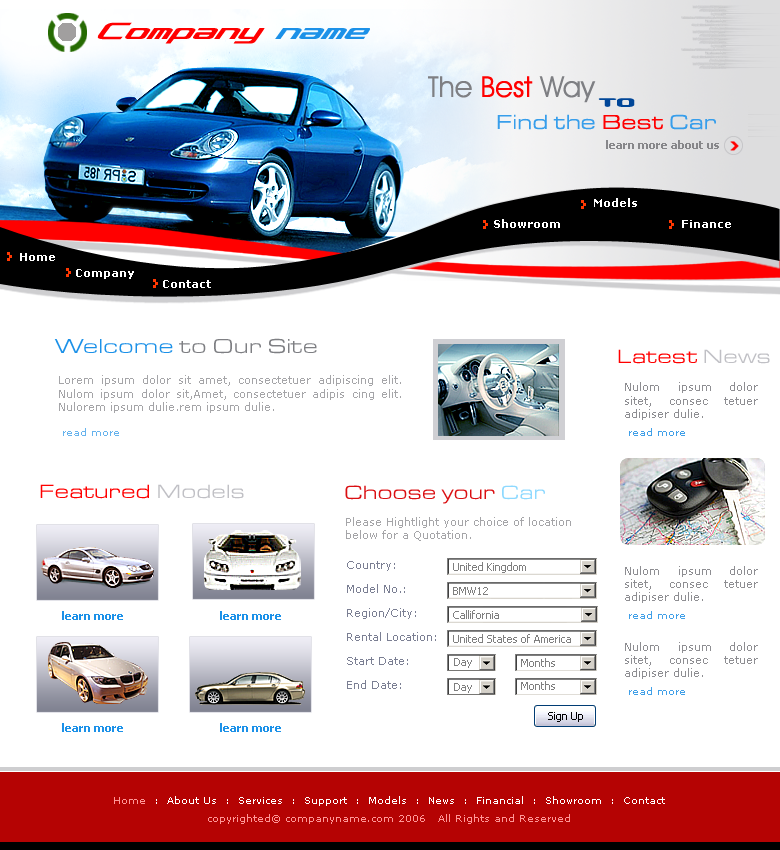
<style>
.page{position:relative;width:780px;height:850px;background:#ffffff}
.page>*{position:absolute;margin:0}
.t1{font:30px "Concielian";color:#ff0000}
.t2{font:30px "Concielian";color:#1c91e8}
.t3{font:29px "AvantGardeITCbyBT-Book";color:#ff0000}
.t4{font:29px "AvantGardeITCbyBT-Book";color:#7e7f83}
.t5{font:22px "Beware";color:#004698}
.t6{font:21px "EurostileExtended-Roman-DTC";color:#379eeb}
.t7{font:21px "EurostileExtended-Roman-DTC";color:#ff0000}
.t8{font:11px "Tahoma-Bold";color:#87878a}
.t9{font:11px "Verdana-Bold";color:#ffffff}
.t10{font:21px "EurostileExtended-Roman-DTC";color:#7e7f83}
.t11{font:21px "EurostileExtended-Roman-DTC";color:#1c91e8}
.t12{font:20px "EurostileExtended-Roman-DTC";color:#ff0000}
.t13{font:20px "EurostileExtended-Roman-DTC";color:#c0c0c5}
.t14{font:11px "Verdana";color:#8e8e92}
.t15{font:10px "Verdana";color:#41a0e8}
.t16{font:20px "EurostileExtended-Roman-DTC";color:#da0f12}
.t17{font:20px "EurostileExtended-Roman-DTC";color:#8ed9ff}
.t18{font:11px "Verdana";color:#a5a5a8}
.t19{font:11px/24px "Verdana";color:#7b7f93}
.t20{font:11px "Tahoma";color:#7f7f7f}
.t21{font:11px "Tahoma-Bold";color:#1c91e8}
.t22{font:10px/18px "Verdana";color:#ffffff}
.t23{font:10px/18px "Verdana";color:#ff9797}
</style>
<div class="page">
<p class="t1" style="left:97px;top:22px;width:273px;height:22px">Company <span class="t2">name</span></p>
<p class="t3" style="left:428px;top:76px;width:168px;height:27px"><span class="t4">The </span>Best<span class="t4"> Way</span></p>
<p class="t5" style="left:598px;top:98px;width:37px;height:9px">to</p>
<p class="t6" style="left:497px;top:114px;width:219px;height:16px">Find the <span class="t7">Best </span>Car</p>
<p class="t8" style="left:606px;top:140px;width:113px;height:9px">learn more about us</p>
<p class="t9" style="left:594px;top:198px;width:43px;height:9px">Models</p>
<p class="t9" style="left:494px;top:219px;width:66px;height:9px">Showroom</p>
<p class="t9" style="left:682px;top:220px;width:49px;height:8px">Finance</p>
<p class="t9" style="left:20px;top:253px;width:35px;height:8px">Home</p>
<p class="t9" style="left:76px;top:269px;width:58px;height:10px">Company</p>
<p class="t9" style="left:163px;top:280px;width:48px;height:8px">Contact</p>
<p class="t10" style="left:54px;top:338px;width:263px;height:16px"><span class="t11">Welcome </span>to Our Site</p>
<p class="t12" style="left:618px;top:349px;width:152px;height:15px">Latest <span class="t13">News</span></p>
<p class="t14" style="left:59px;top:375px;width:342px;height:61px;text-align:justify;opacity:0.8">Lorem ipsum dolor sit amet, consectetuer adipiscing elit. Nulom ipsum dolor sit,Amet, consectetuer adipis cing elit. Nulorem ipsum dulie.rem ipsum dulie.<br><br><span class="t15"> read more</span></p>
<p class="t12" style="left:40px;top:484px;width:204px;height:15px">Featured <span class="t13">Models</span></p>
<p class="t16" style="left:345px;top:485px;width:200px;height:19px">Choose your<span class="t17"> Car</span></p>
<p class="t18" style="left:346px;top:517px;width:225px;height:24px">Please Hightlight your choice of location<br>below for a Quotation.</p>
<p class="t19" style="left:347px;top:561px;width:89px;height:128px">Country:<br>Model No.:<br>Region/City:<br>Rental Location:<br>Start Date:<br>End Date:</p>
<p class="t20" style="left:453px;top:562px;width:73px;height:11px">United Kingdom</p>
<p class="t20" style="left:453px;top:587px;width:35px;height:8px">BMW12</p>
<p class="t21" style="left:62px;top:611px;width:219px;height:9px">learn more                                learn more</p>
<p class="t20" style="left:453px;top:610px;width:46px;height:9px">Callifornia</p>
<p class="t20" style="left:453px;top:634px;width:118px;height:9px">United States of America</p>
<p class="t20" style="left:454px;top:658px;width:18px;height:10px">Day</p>
<p class="t20" style="left:521px;top:658px;width:34px;height:9px">Months</p>
<p class="t20" style="left:454px;top:683px;width:18px;height:10px">Day</p>
<p class="t20" style="left:521px;top:681px;width:34px;height:9px">Months</p>
<p class="t21" style="left:62px;top:723px;width:219px;height:9px">learn more                                learn more</p>
<p class="t22" style="left:114px;top:796px;width:551px;height:28px;text-align:center"><span class="t23">Home</span>  :  About Us  :  Services  :  Support  :  Models  :  News  :  Financial  :  Showroom  :  Contact<br><span class="t23">copyrighted© companyname.com 2006   All Rights and Reserved</span></p>
</div>
